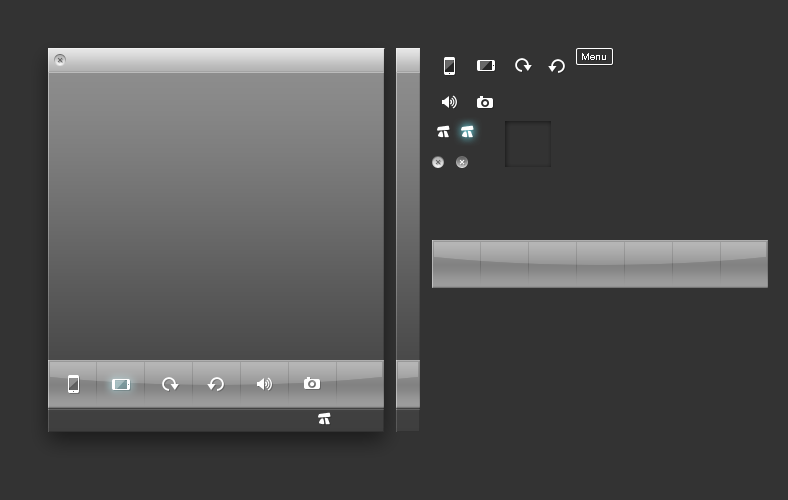
<style>
.page{position:relative;width:788px;height:500px;background:#333333}
.page>*{position:absolute;margin:0}
.t1{font:10px "HelveticaNeue";color:#ffffff}
</style>
<div class="page">
<p class="t1" style="left:582px;top:53px;width:24px;height:7px">Menu</p>
</div>
